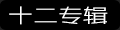
<style>
.page{position:relative;width:120px;height:30px;background:#000000}
.page>*{position:absolute;margin:0}
.t1{font:20.8px "ZHSRXT--GBK1-0";color:#ffffff;scale:1.2 1}
</style>
<div class="page">
<p class="t1" style="left:9px;top:6px;width:99px;height:19px">十二专辑</p>
</div>
